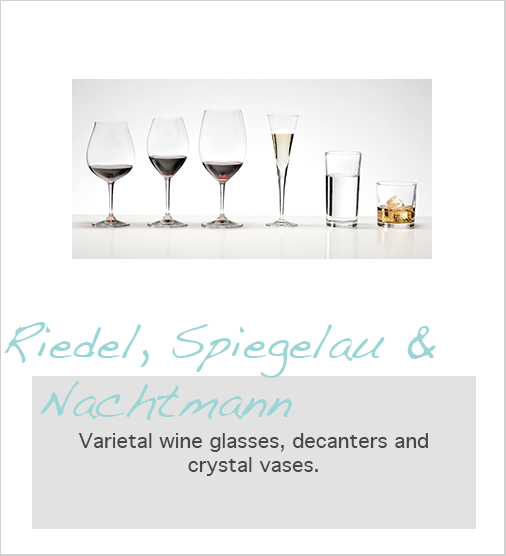
<style>
.page{position:relative;width:506px;height:556px;background:#ffffff}
.page>*{position:absolute;margin:0}
.t1{font:48px "Handwriting-Dakota";color:#9bd5d5}
.t2{font:20px "Geneva";color:#484743}
</style>
<div class="page">
<p class="t1" style="left:4px;top:322px;width:432px;height:98px">Riedel, Spiegelau &amp; <br> Nachtmann</p>
<p class="t2" style="left:78px;top:433px;width:350px;height:43px;text-align:center">Varietal wine glasses, decanters and crystal vases.</p>
</div>
